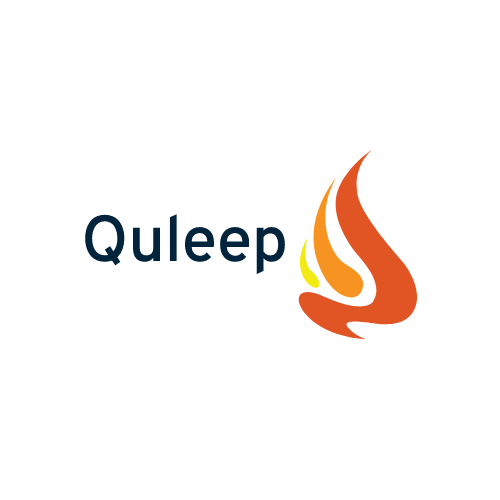
<style>
.page{position:relative;width:500px;height:500px;background:#ffffff}
.page>*{position:absolute;margin:0}
.t1{font:64.9px "Overpass-SemiBold";color:#00243c}
</style>
<div class="page">
<p class="t1" style="left:85px;top:214px;width:200px;height:61px">Quleep</p>
</div>
